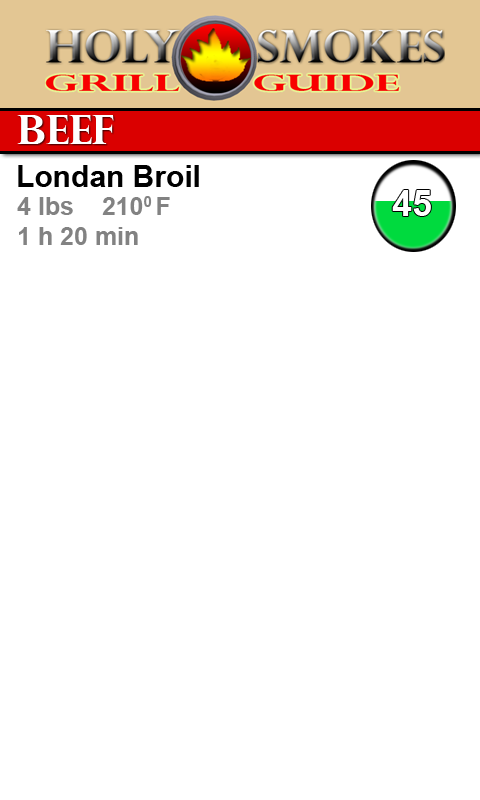
<style>
.page{position:relative;width:480px;height:800px;background:#ffffff}
.page>*{position:absolute;margin:0}
.t1{font:40px "PerpetuaTitlingMT-Bold";color:#ffffff}
.t2{font:30px "Arial-BoldMT";color:#000000}
.t3{font:25px "Arial-BoldMT";color:#828282}
.t4{font:36px "Arial-BoldMT";color:#ffffff}
</style>
<div class="page">
<p class="t1" style="left:17px;top:115px;width:97px;height:29px">Beef</p>
<p class="t2" style="left:18px;top:165px;width:181px;height:22px">Londan Broil</p>
<p class="t3" style="left:17px;top:196px;width:153px;height:49px">4 lbs    2100 F<br>1 h 20 min</p>
<p class="t4" style="left:392px;top:190px;width:39px;height:26px">45</p>
</div>
